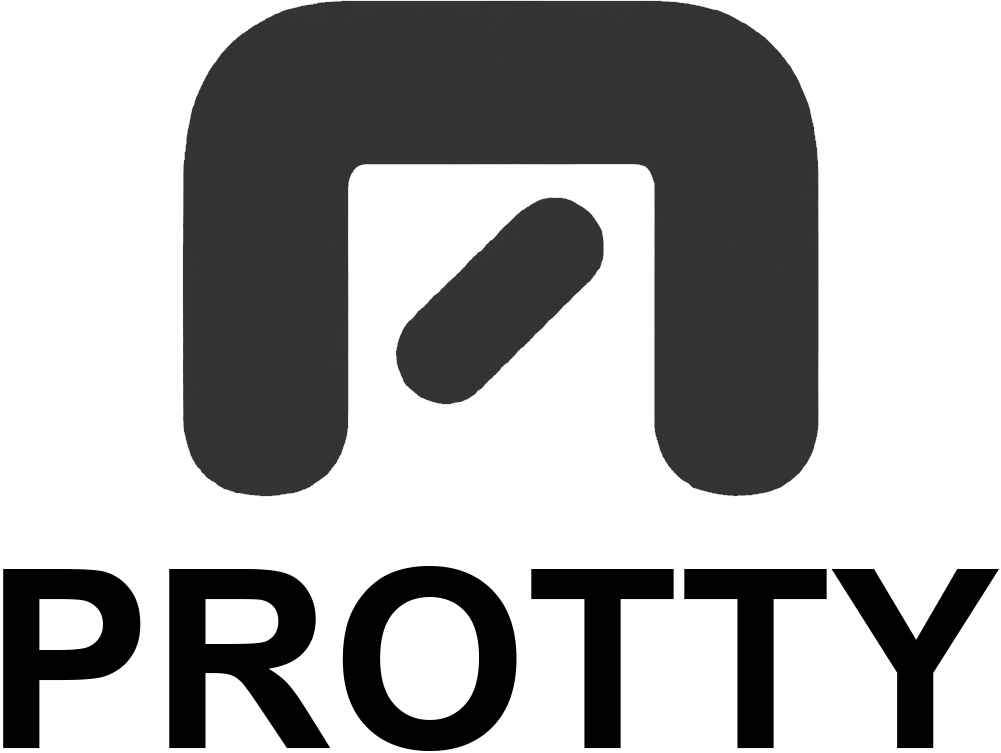
<style>
.page{position:relative;width:1001px;height:753px;background:#ffffff}
.page>*{position:absolute;margin:0}
.t1{font:250px "Arial-BoldMT";color:#000000}
</style>
<div class="page">
<p class="t1" style="left:3px;top:566px;width:996px;height:185px">PROTTY</p>
</div>
